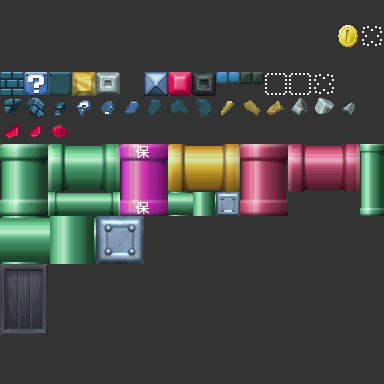
<style>
.page{position:relative;width:384px;height:384px;background:#333333}
.page>*{position:absolute;margin:0}
.t1{font:13.3px "KozGoPr6N-Regular";color:#ffffff}
</style>
<div class="page">
<p class="t1" style="left:135px;top:145px;width:14px;height:13px">保</p>
<p class="t1" style="left:135px;top:201px;width:14px;height:13px">保</p>
</div>
